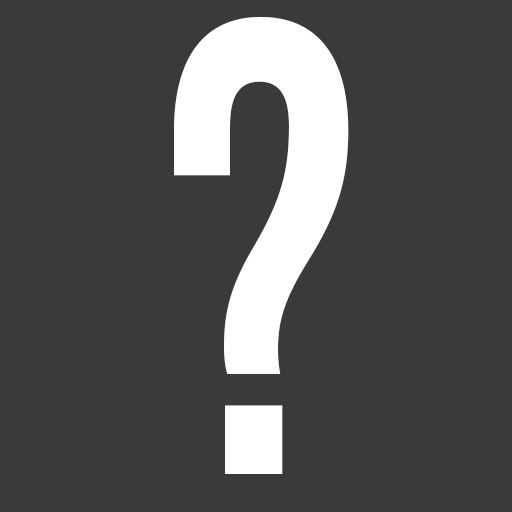
<style>
.page{position:relative;width:512px;height:512px;background:#393a3b}
.page>*{position:absolute;margin:0}
.t1{font:646.3px "BebasNeue";letter-spacing:-0.025em;color:#ffffff;text-transform:uppercase;scale:0.83 1}
</style>
<div class="page">
<p class="t1" style="left:174px;top:16px;width:175px;height:458px">?</p>
</div>
